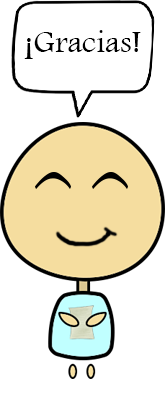
<style>
.page{position:relative;width:165px;height:402px;background:#ffffff}
.page>*{position:absolute;margin:0}
.t1{font:31.8px "FootlightMTLight";color:#000000}
</style>
<div class="page">
<p class="t1" style="left:24px;top:30px;width:117px;height:29px">¡Gracias!</p>
</div>
